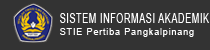
<style>
.page{position:relative;width:210px;height:50px;background:#333333}
.page>*{position:absolute;margin:0}
.t1{font:14.4px "ArialMT";letter-spacing:0.075em;color:#ffffff;scale:0.62 1}
.t2{font:9.3px "ArialMT";letter-spacing:0.075em;color:#ffffff}
</style>
<div class="page">
<p class="t1" style="left:60px;top:13px;width:149px;height:10px">SISTEM INFORMASI AKADEMIK</p>
<p class="t2" style="left:60px;top:28px;width:134px;height:9px">STIE Pertiba Pangkalpinang</p>
</div>
